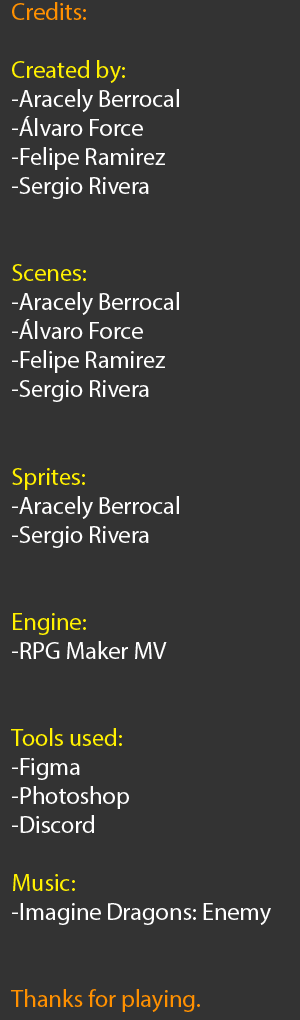
<style>
.page{position:relative;width:300px;height:1020px;background:#333333}
.page>*{position:absolute;margin:0}
.t1{font:24.2px "MyriadPro-Regular";color:#ffffff}
.t2{font:24.2px "MyriadPro-Regular";color:#ff9000}
.t3{font:24.2px "MyriadPro-Regular";color:#fff000}
</style>
<div class="page">
<p class="t1" style="left:11px;top:2px;width:260px;height:1010px"><span class="t2">Credits:<br><br></span><span class="t3">Created by:<br></span>-Aracely Berrocal<br>-Álvaro Force<br>-Felipe Ramirez<br>-Sergio Rivera<br><br><br><span class="t3">Scenes:<br></span>-Aracely Berrocal<br>-Álvaro Force<br>-Felipe Ramirez<br>-Sergio Rivera<br><br><br><span class="t3">Sprites:<br></span>-Aracely Berrocal<br>-Sergio Rivera<br><br><br><span class="t3">Engine:<br></span>-RPG Maker MV<br><br><br><span class="t3">Tools used:<br></span>-Figma<br>-Photoshop<br>-Discord<br><br><span class="t3">Music:<br></span>-Imagine Dragons: Enemy<br><br><br><span class="t2">Thanks for playing.</span></p>
</div>
